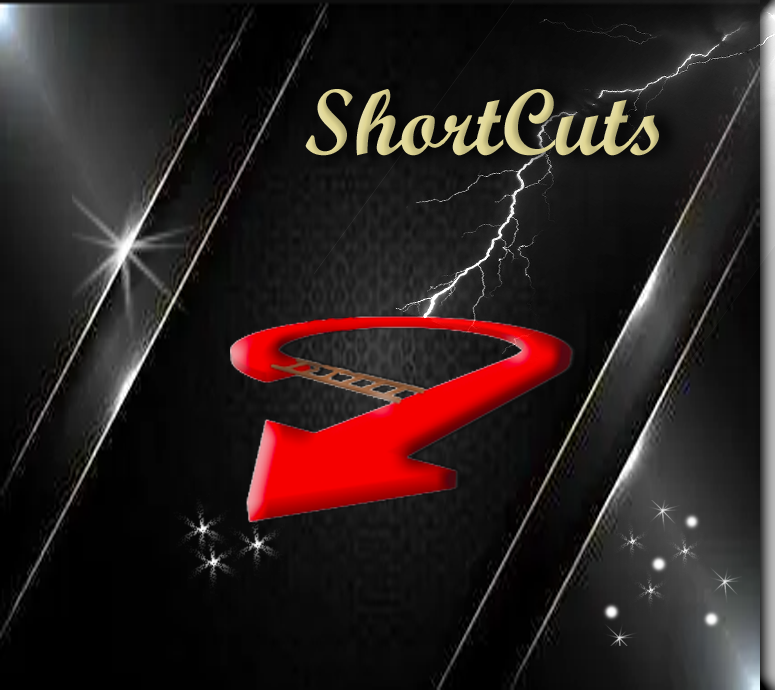
<style>
.page{position:relative;width:775px;height:690px}
.page>*{position:absolute;margin:0}
.t1{font:93.3px "ScriptMTBold";color:#e0d693}
</style>
<div class="page">
<p class="t1" style="left:305px;top:89px;width:354px;height:67px">ShortCuts</p>
</div>
